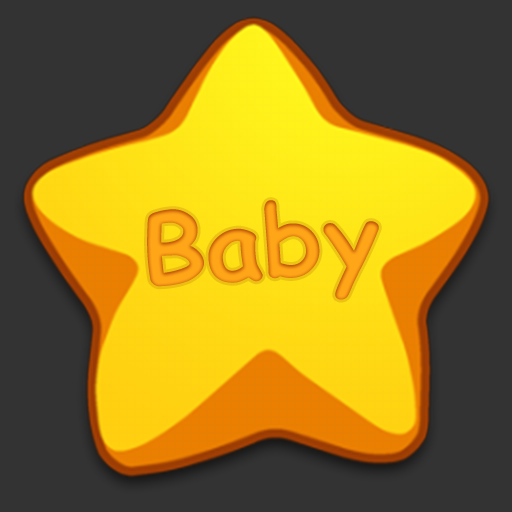
<style>
.page{position:relative;width:512px;height:512px;background:#333333}
.page>*{position:absolute;margin:0}
.t1{font:93.6px "ComicSansMS-Bold";color:#fca117;scale:1.04 1}
</style>
<div class="page">
<p class="t1" style="left:147px;top:200px;width:232px;height:100px;rotate:-4deg">Baby</p>
</div>
